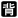
<style>
.page{position:relative;width:18px;height:18px;background:#ffffff}
.page>*{position:absolute;margin:0}
.t1{font:13.5px "STHeitiSC-Medium";color:#ffffff}
</style>
<div class="page">
<p class="t1" style="left:2px;top:3px;width:13px;height:13px">背</p>
</div>
